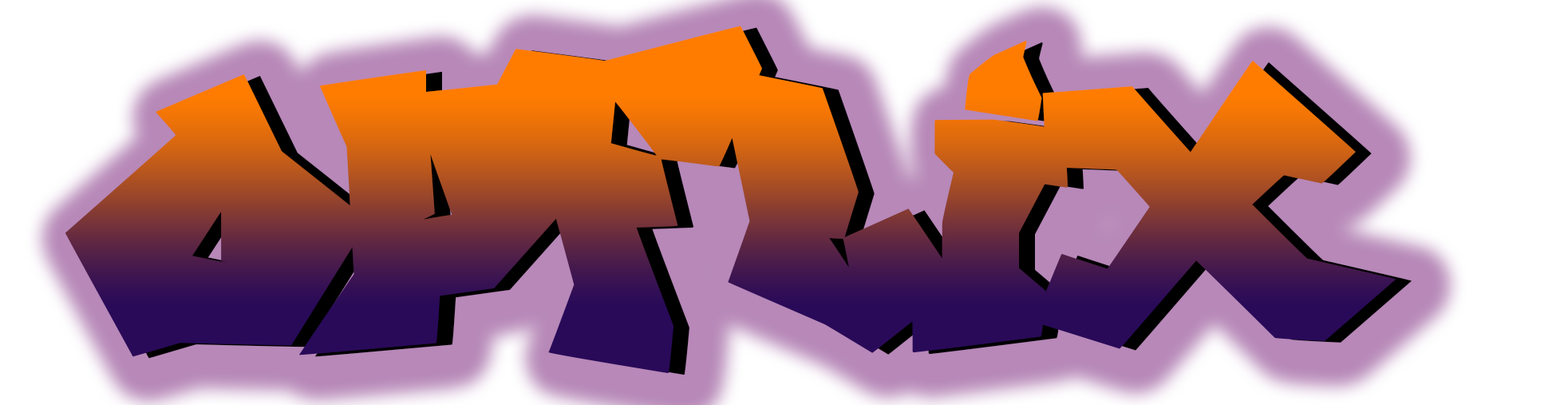
<style>
.page{position:relative;width:1568px;height:405px;background:#ffffff}
.page>*{position:absolute;margin:0}
.t1{font:404.3px "FTFIndonesianaGoGraffitiana"}
</style>
<div class="page">
<p class="t1" style="left:65px;top:26px;width:1331px;height:347px">OPFLIX</p>
<p class="t1" style="left:81px;top:27px;width:1331px;height:348px">OPFLIX</p>
</div>
